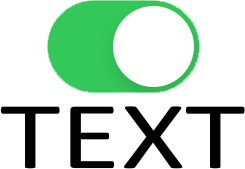
<style>
.page{position:relative;width:245px;height:169px;background:#ffffff}
.page>*{position:absolute;margin:0}
.t1{font:96.8px "Calibri";color:#000000;scale:1.28 1}
</style>
<div class="page">
<p class="t1" style="left:0px;top:106px;width:245px;height:63px">TEXT</p>
</div>
